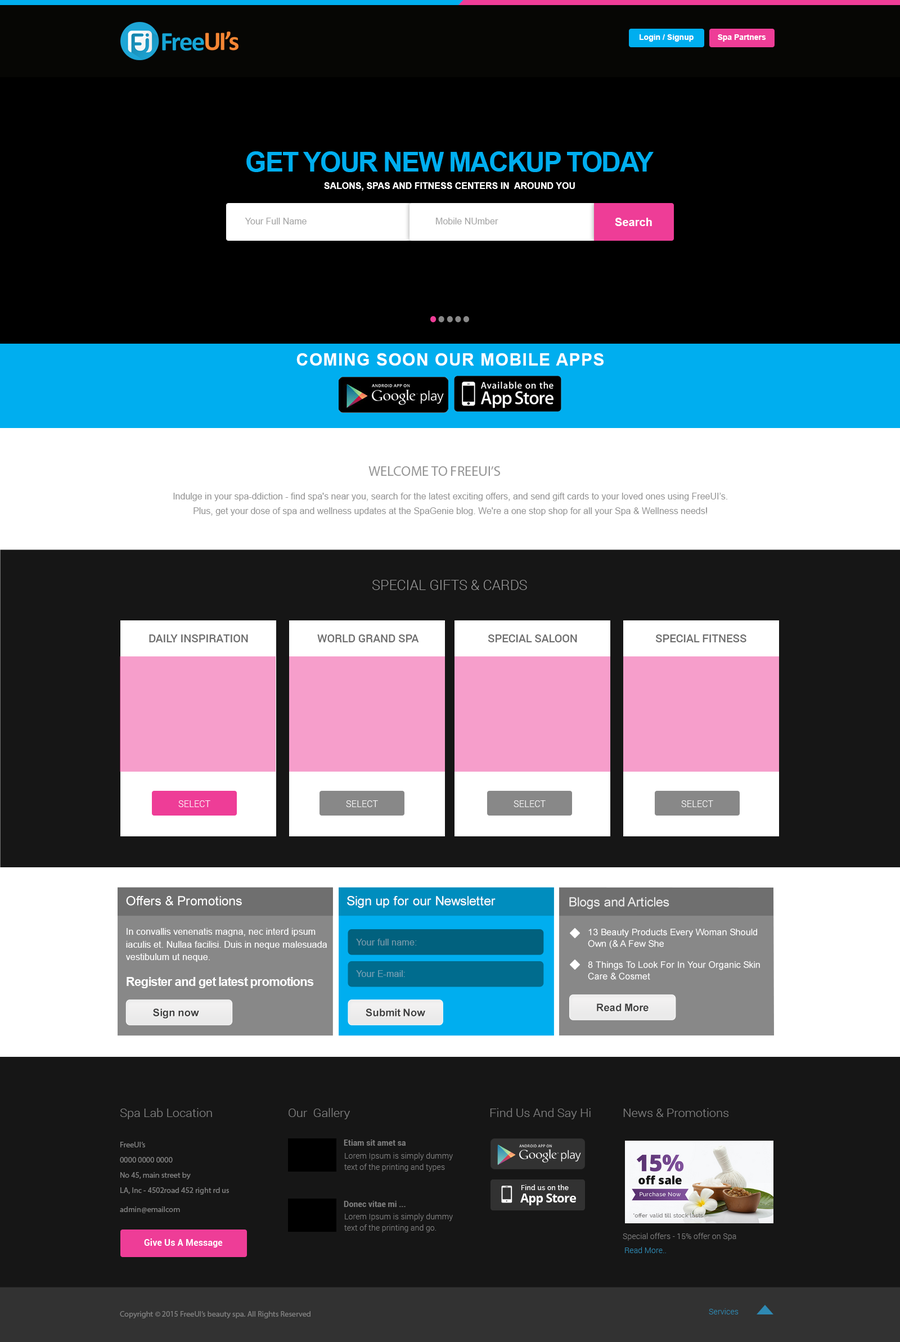
<style>
.page{position:relative;width:900px;height:1342px;background:#161616}
.page>*{position:absolute;margin:0}
.t1{font:7.9px "Arial-BoldMT";color:#ffffff}
.t2{font:26.9px "Arial-BoldMT";letter-spacing:-0.04em;color:#00aeef;text-transform:uppercase}
.t3{font:9px "Arial-BoldMT";color:#ffffff;text-transform:uppercase}
.t4{font:9px "ArialMT";color:#a3a3a3}
.t5{font:11.4px "Arial-BoldMT";color:#ffffff}
.t6{font:16.9px "Arial-BoldMT";letter-spacing:0.05em;color:#ffffff;text-transform:uppercase}
.t7{font:14.1px "MyriadPro-Regular";color:#949494;text-transform:uppercase}
.t8{font:9px/14.6px "ArialMT";color:#949494}
.t9{font:14.1px "Roboto-Light";color:#9a9a9a;text-transform:uppercase}
.t10{font:11.2px "Roboto-Medium";color:#6e6e6e}
.t11{font:11.2px "Roboto-Medium";color:#6e6e6e;text-transform:uppercase}
.t12{font:9px "Roboto-Light";letter-spacing:0.02em;color:#ffffff;text-transform:uppercase}
.t13{font:12.8px "ArialMT";color:#ffffff}
.t14{font:12.8px "ArialMT";color:#ededed}
.t15{font:9px/12.8px "ArialMT";color:#ffffff}
.t16{font:12.4px/12.8px "Arial-BoldMT";letter-spacing:-0.04em;color:#ffffff}
.t17{font:9px/11.5px "ArialMT";color:#ffffff}
.t18{font:9px "ArialMT";color:#759bab}
.t19{font:9px "ArialMT";color:#74a1b5}
.t20{font:10.3px "Arial-BoldMT";color:#3e3e3e}
.t21{font:12px "Roboto-Light";color:#808080}
.t22{font:7.9px/15.2px "MyriadPro-Regular";color:#808080}
.t23{font:7.9px "Roboto-Bold";color:#808080}
.t24{font:7.9px/11.3px "Roboto-Light";color:#808080}
.t25{font:7.9px "MyriadPro-Regular";color:#808080}
.t26{font:9px "Roboto-Bold";color:#ffffff}
.t27{font:7.9px "Roboto-Light";color:#808080}
.t28{font:7.9px "Roboto-Light";color:#2e89b3}
</style>
<div class="page">
<p class="t1" style="left:640px;top:34px;width:54px;height:8px">Login / Signup</p>
<p class="t1" style="left:718px;top:34px;width:48px;height:8px">Spa Partners</p>
<p class="t2" style="left:246px;top:151px;width:408px;height:21px">Get Your New Mackup Today</p>
<p class="t3" style="left:324px;top:182px;width:251px;height:9px">Salons, Spas and Fitness Centers in  around you</p>
<p class="t4" style="left:245px;top:218px;width:62px;height:6px">Your Full Name</p>
<p class="t4" style="left:436px;top:218px;width:62px;height:6px">Mobile NUmber</p>
<p class="t5" style="left:615px;top:218px;width:37px;height:8px">Search</p>
<p class="t6" style="left:296px;top:353px;width:308px;height:13px">Coming Soon Our Mobile Apps</p>
<p class="t7" style="left:368px;top:466px;width:132px;height:10px">Welcome to FreeUI’s</p>
<p class="t8" style="left:173px;top:493px;width:554px;height:23px;text-align:center">Indulge in your spa-ddiction - find spa's near you, search for the latest exciting offers, and send gift cards to your loved ones using FreeUI’s.<br>Plus, get your dose of spa and wellness updates at the SpaGenie blog. We're a one stop shop for all your Spa &amp; Wellness needs!</p>
<p class="t9" style="left:372px;top:580px;width:155px;height:10px">Special Gifts &amp; Cards</p>
<p class="t10" style="left:149px;top:634px;width:99px;height:8px">DAILY INSPIRATION</p>
<p class="t11" style="left:317px;top:634px;width:102px;height:8px">World Grand Spa</p>
<p class="t11" style="left:488px;top:634px;width:89px;height:8px">Special Saloon</p>
<p class="t11" style="left:655px;top:634px;width:91px;height:8px">Special Fitness</p>
<p class="t12" style="left:178px;top:800px;width:32px;height:7px">Select</p>
<p class="t12" style="left:346px;top:800px;width:32px;height:7px">Select</p>
<p class="t12" style="left:514px;top:800px;width:32px;height:7px">Select</p>
<p class="t12" style="left:681px;top:800px;width:32px;height:7px">Select</p>
<p class="t13" style="left:126px;top:896px;width:116px;height:10px">Offers &amp; Promotions</p>
<p class="t13" style="left:347px;top:896px;width:149px;height:12px">Sign up for our Newsletter</p>
<p class="t14" style="left:569px;top:897px;width:100px;height:13px">Blogs and Articles</p>
<p class="t15" style="left:126px;top:928px;width:201px;height:60px">In convallis venenatis magna, nec interd ipsum<br>iaculis et. Nullaa facilisi. Duis in neque malesuada<br>vestibulum ut neque.<br><br><span class="t16">Register and get latest promotions</span></p>
<p class="t17" style="left:588px;top:929px;width:169px;height:20px">13 Beauty Products Every Woman Should<br>Own (&amp; A Few She</p>
<p class="t18" style="left:356px;top:939px;width:61px;height:7px">Your full name:</p>
<p class="t17" style="left:588px;top:961px;width:172px;height:19px">8 Things To Look For In Your Organic Skin<br>Care &amp; Cosmet</p>
<p class="t19" style="left:356px;top:970px;width:49px;height:7px">Your E-mail:</p>
<p class="t20" style="left:153px;top:1009px;width:46px;height:10px">Sign now</p>
<p class="t20" style="left:366px;top:1009px;width:59px;height:7px">Submit Now</p>
<p class="t20" style="left:597px;top:1004px;width:52px;height:7px">Read More</p>
<p class="t21" style="left:120px;top:1108px;width:92px;height:11px">Spa Lab Location</p>
<p class="t21" style="left:289px;top:1108px;width:61px;height:11px">Our  Gallery</p>
<p class="t21" style="left:490px;top:1108px;width:101px;height:11px">Find Us And Say Hi</p>
<p class="t21" style="left:623px;top:1108px;width:106px;height:9px">News &amp; Promotions</p>
<p class="t22" style="left:120px;top:1142px;width:109px;height:53px">FreeUI’s<br>0000 0000 0000<br>No 45, main street by <br>LA, Inc - 4502road 452 right rd us</p>
<p class="t23" style="left:344px;top:1140px;width:62px;height:6px">Etiam sit amet sa</p>
<p class="t24" style="left:344px;top:1153px;width:109px;height:19px">Lorem Ipsum is simply dummy <br>text of the printing and types</p>
<p class="t23" style="left:344px;top:1201px;width:62px;height:6px">Donec vitae mi ...</p>
<p class="t25" style="left:120px;top:1207px;width:60px;height:6px">admin@emailcom</p>
<p class="t24" style="left:344px;top:1213px;width:109px;height:19px">Lorem Ipsum is simply dummy <br>text of the printing and go.</p>
<p class="t26" style="left:144px;top:1239px;width:79px;height:9px">Give Us A Message</p>
<p class="t27" style="left:623px;top:1233px;width:113px;height:8px">Special offers - 15% offer on Spa</p>
<p class="t28" style="left:625px;top:1247px;width:41px;height:6px">Read More..</p>
<p class="t25" style="left:120px;top:1311px;width:190px;height:7px">Copyright © 2015 FreeUI’s beauty spa. All Rights Reserved</p>
<p class="t28" style="left:709px;top:1308px;width:30px;height:7px">Services</p>
</div>
